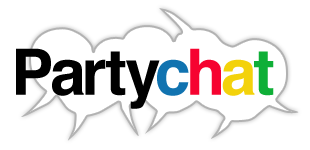
<style>
.page{position:relative;width:310px;height:150px;background:#ffffff}
.page>*{position:absolute;margin:0}
.t1{font:64px "Helvetica-Bold";letter-spacing:-0.06em;color:#000000}
.t2{font:64px "Helvetica-Bold";letter-spacing:-0.025em;color:#000000}
.t3{font:64px "Helvetica-Bold";letter-spacing:-0.06em;color:#1173b0}
.t4{font:64px "Helvetica-Bold";letter-spacing:-0.06em;color:#f60330}
.t5{font:64px "Helvetica-Bold";letter-spacing:-0.04em;color:#f3d20b}
.t6{font:64px "Helvetica-Bold";letter-spacing:-0.06em;color:#0faf37}
</style>
<div class="page">
<p class="t1" style="left:16px;top:48px;width:258px;height:61px">Pa<span class="t2">rt</span>y<span class="t3">c</span><span class="t4">h</span><span class="t5">a</span><span class="t6">t</span></p>
</div>
